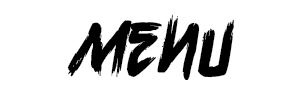
<style>
.page{position:relative;width:300px;height:100px;background:#ffffff}
.page>*{position:absolute;margin:0}
.t1{font:78px "OverdriveSunset";color:#000000}
</style>
<div class="page">
<p class="t1" style="left:67px;top:14px;width:167px;height:67px">Menu</p>
</div>
